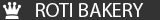
<style>
.page{position:relative;width:160px;height:20px;background:#333333}
.page>*{position:absolute;margin:0}
.t1{font:20px "MyriadPro-Regular";color:#ffffff}
</style>
<div class="page">
<p class="t1" style="left:36px;top:3px;width:108px;height:14px">ROTI BAKERY</p>
</div>
